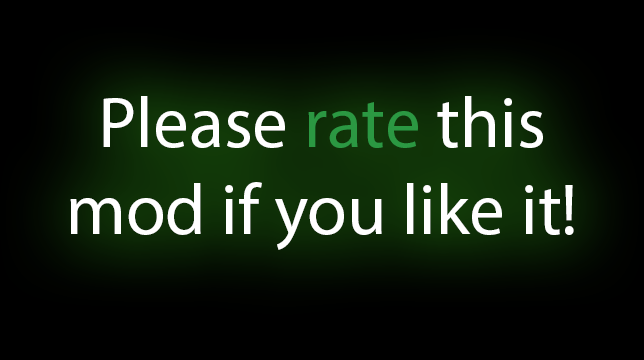
<style>
.page{position:relative;width:644px;height:360px;background:#000000}
.page>*{position:absolute;margin:0}
.t1{font:72px "MyriadPro-Regular";color:#ffffff}
.t2{font:72px "MyriadPro-Regular";color:#2b9842}
</style>
<div class="page">
<p class="t1" style="left:70px;top:96px;width:504px;height:154px;text-align:center">Please <span class="t2">rate</span> this mod if you like it!</p>
</div>
